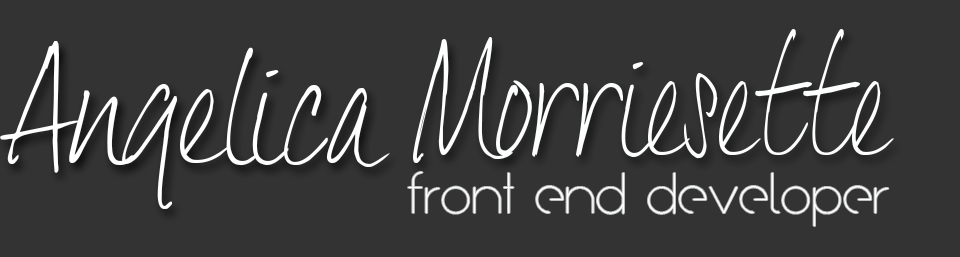
<style>
.page{position:relative;width:960px;height:257px;background:#333333}
.page>*{position:absolute;margin:0}
.t1{font:135px "DexteraTrial";color:#fdfefe;scale:0.86 1}
.t2{font:134.6px "DexteraTrial";color:#ffffff}
.t3{font:48px "Arual";color:#ffffff}
</style>
<div class="page">
<p class="t1" style="left:413px;top:29px;width:481px;height:134px">Morriesette</p>
<p class="t2" style="left:0px;top:41px;width:390px;height:168px">Angelica</p>
<p class="t3" style="left:408px;top:172px;width:481px;height:54px">front end developer</p>
</div>
